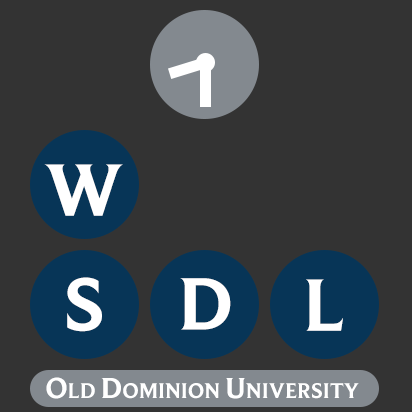
<style>
.page{position:relative;width:412px;height:412px;background:#333333}
.page>*{position:absolute;margin:0}
.t1{font:77px "BeaufortW01-Bold";color:#ffffff}
.t2{font:22px "BeaufortW01-Bold";color:#ffffff}
.t3{font:30px "BeaufortW01-Bold";color:#ffffff}
</style>
<div class="page">
<p class="t1" style="left:44px;top:164px;width:79px;height:52px">W</p>
<p class="t1" style="left:67px;top:277px;width:35px;height:55px">S</p>
<p class="t1" style="left:180px;top:278px;width:51px;height:52px">D</p>
<p class="t1" style="left:306px;top:279px;width:37px;height:52px">L</p>
<p class="t2" style="left:46px;top:377px;width:313px;height:22px"><span class="t3">O</span>LD <span class="t3">D</span>OMINION <span class="t3">U</span>NIVERSITY</p>
</div>
